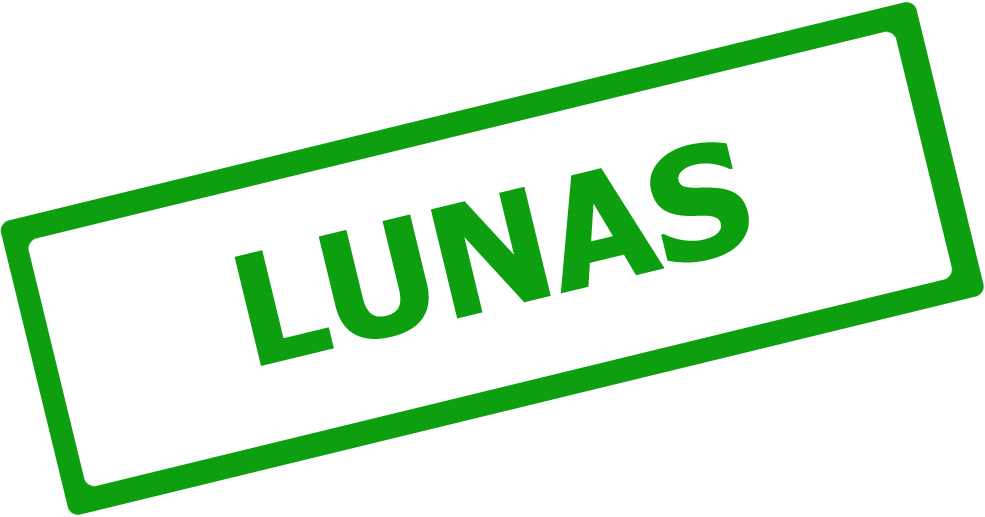
<style>
.page{position:relative;width:985px;height:517px;background:#ffffff}
.page>*{position:absolute;margin:0}
.t1{font:154px "Tahoma-Bold";color:#0e9f11}
</style>
<div class="page">
<p class="t1" style="left:234px;top:142px;width:515px;height:224px;rotate:-14deg">LUNAS</p>
</div>
